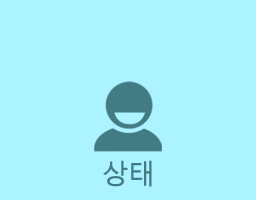
<style>
.page{position:relative;width:256px;height:200px;background:#abf3ff}
.page>*{position:absolute;margin:0}
.t1{font:26.7px "MalgunGothicRegular";letter-spacing:-0.05em;color:#437b85;font-weight:bold}
</style>
<div class="page">
<p class="t1" style="left:103px;top:160px;width:49px;height:27px">상태</p>
</div>
